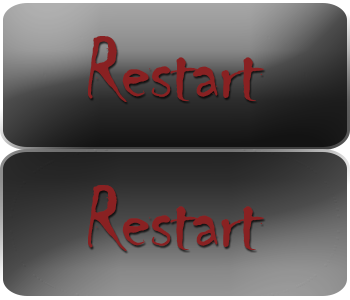
<style>
.page{position:relative;width:350px;height:300px}
.page>*{position:absolute;margin:0}
.t1{font:89.9px "Chiller-Regular";letter-spacing:-0.025em;color:#892122}
</style>
<div class="page">
<p class="t1" style="left:88px;top:36px;width:176px;height:66px">Restart</p>
<p class="t1" style="left:88px;top:185px;width:176px;height:66px">Restart</p>
</div>
